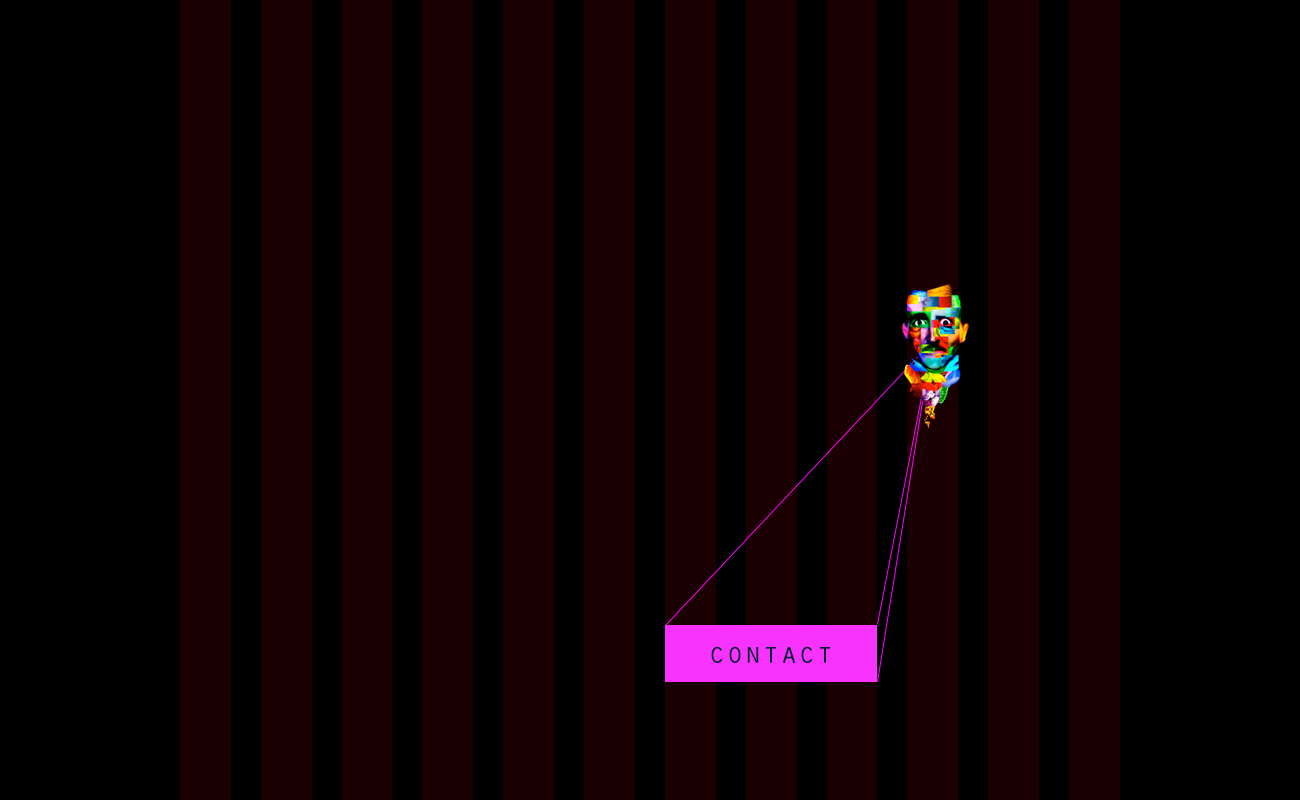
<style>
.page{position:relative;width:1300px;height:800px;background:#000000}
.page>*{position:absolute;margin:0}
.t1{font:30px "OratorStd";color:#002035}
</style>
<div class="page">
<p class="t1" style="left:711px;top:646px;width:120px;height:18px">contact</p>
</div>
